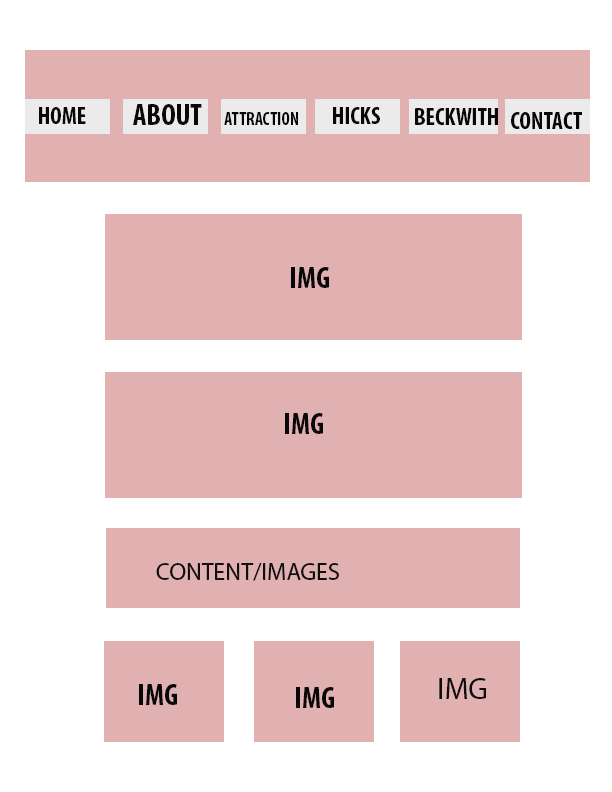
<style>
.page{position:relative;width:612px;height:792px;background:#ffffff}
.page>*{position:absolute;margin:0}
.t1{font:24px "MyriadPro-BoldCond";color:#090909}
.t2{font:30px "MyriadPro-BoldCond";color:#090909}
.t3{font:18px "MyriadPro-BoldCond";color:#090808}
.t4{font:24px "MyriadPro-BoldCond";color:#090808}
.t5{font:30px "MyriadPro-BoldCond";color:#080808}
.t6{font:30px "MyriadPro-BoldCond";color:#090808}
.t7{font:24px "MyriadPro-Regular";color:#0f0e0e}
.t8{font:30px "MyriadPro-Regular";color:#0f0e0e}
</style>
<div class="page">
<p class="t1" style="left:39px;top:107px;width:47px;height:17px">HOME</p>
<p class="t2" style="left:133px;top:104px;width:69px;height:21px">ABOUT</p>
<p class="t3" style="left:224px;top:112px;width:74px;height:13px">ATTRACTION</p>
<p class="t4" style="left:333px;top:107px;width:47px;height:17px">HICKS</p>
<p class="t4" style="left:415px;top:108px;width:83px;height:17px">BECKWITH</p>
<p class="t4" style="left:511px;top:112px;width:71px;height:17px">CONTACT</p>
<p class="t5" style="left:291px;top:267px;width:38px;height:21px">IMG</p>
<p class="t6" style="left:285px;top:413px;width:38px;height:21px">IMG</p>
<p class="t7" style="left:156px;top:563px;width:183px;height:18px">CONTENT/IMAGES</p>
<p class="t8" style="left:439px;top:678px;width:47px;height:21px">IMG</p>
<p class="t6" style="left:139px;top:684px;width:38px;height:21px">IMG</p>
<p class="t6" style="left:296px;top:687px;width:38px;height:21px">IMG</p>
</div>
